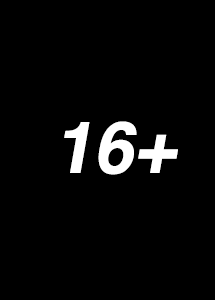
<style>
.page{position:relative;width:215px;height:300px;background:#000000}
.page>*{position:absolute;margin:0}
.t1{font:72px "Helvetica-Bold";color:#ffffff;font-style:italic}
</style>
<div class="page">
<p class="t1" style="left:64px;top:121px;width:114px;height:54px">16+</p>
</div>
